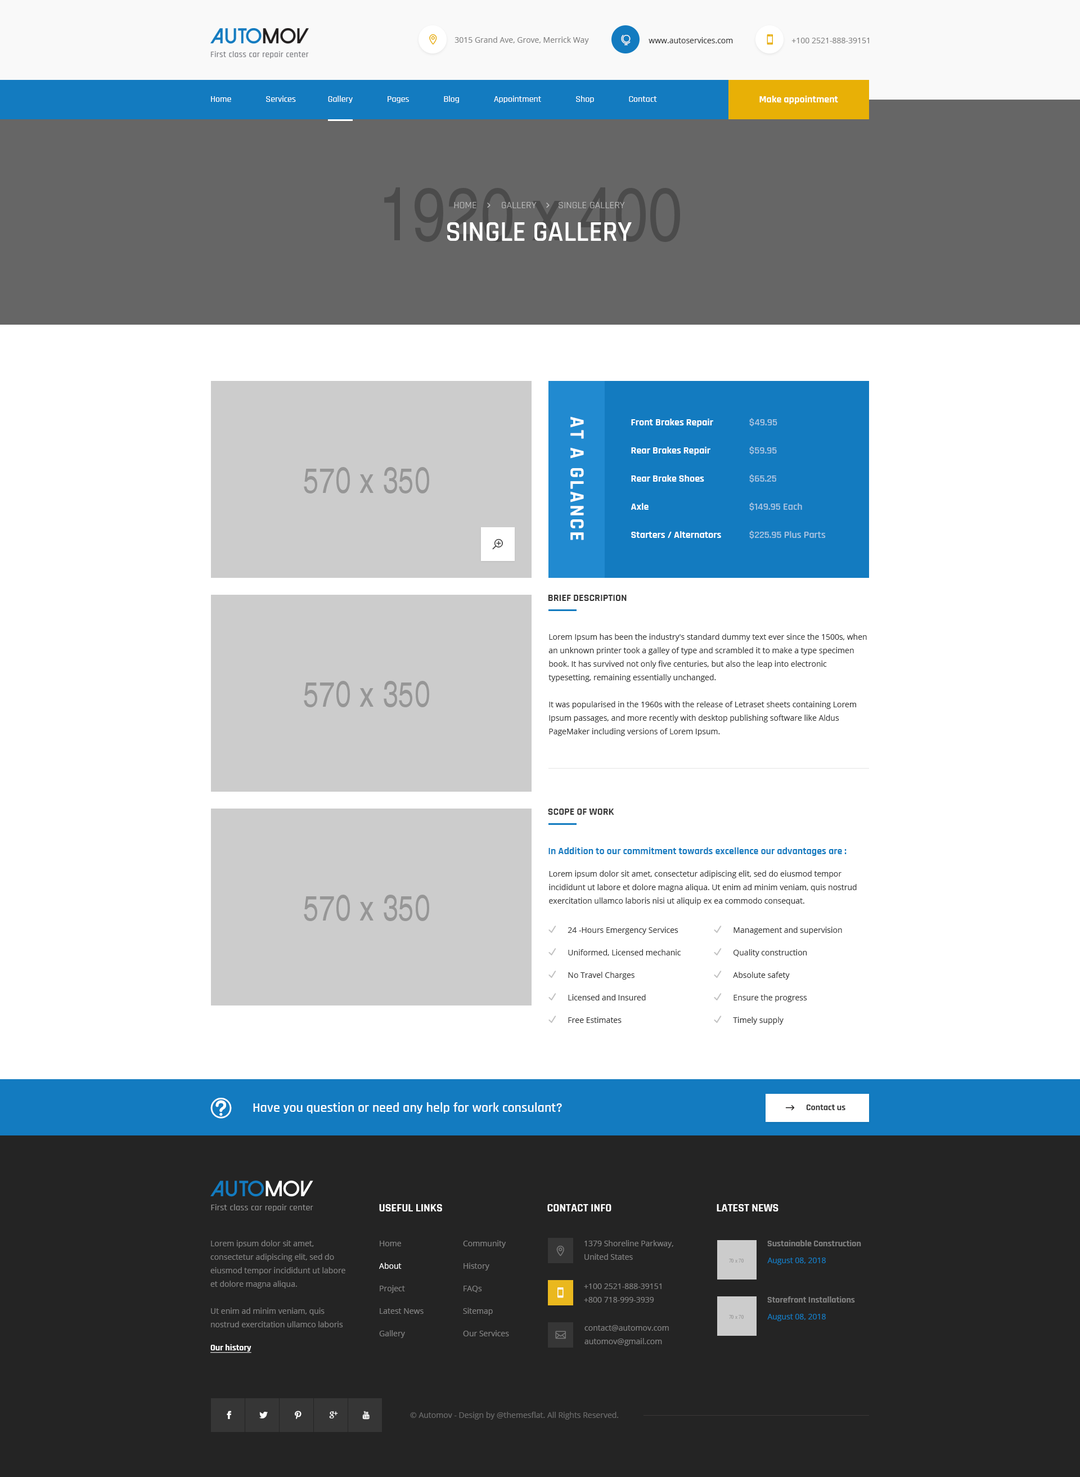
<style>
.page{position:relative;width:1080px;height:1477px;background:#ffffff}
.page>*{position:absolute;margin:0}
.t1{font:7.9px "OpenSans";color:#838383}
.t2{font:7.9px "OpenSans";color:#363636}
.t3{font:9px "Rajdhani-Medium";color:#ffffff}
.t4{font:10.1px "Rajdhani-Bold";color:#ffffff}
.t5{font:10.1px "Rajdhani-Regular";color:#bcbcbc}
.t6{font:28.1px "Rajdhani-SemiBold";color:#ffffff;text-transform:uppercase}
.t7{font:20.2px "Rajdhani-Bold";letter-spacing:0.1em;color:#ffffff}
.t8{font:10.1px/28.1px "Rajdhani-Bold";color:#ffffff}
.t9{font:10.1px/28.1px "Rajdhani-SemiBold";color:#a7c4e1}
.t10{font:10.1px "Rajdhani-Bold";color:#363636}
.t11{font:7.9px/13.5px "OpenSans";color:#363636}
.t12{font:10.1px "Rajdhani-Bold";color:#137bc0}
.t13{font:7.9px/22.5px "OpenSans";color:#363636}
.t14{font:13.5px "Rajdhani-SemiBold";color:#ffffff}
.t15{font:9px "Rajdhani-Bold";color:#363636}
.t16{font:11.2px "Rajdhani-Bold";color:#ffffff;text-transform:uppercase}
.t17{font:11.2px "Rajdhani-Bold";color:#ffffff}
.t18{font:7.9px/13.5px "OpenSans";color:#808080}
.t19{font:7.9px/22.5px "OpenSans";color:#808080}
.t20{font:7.9px/22.5px "OpenSans";color:#ffffff}
.t21{font:9px "Rajdhani-Bold";color:#808080}
.t22{font:7.9px "OpenSans";color:#137bc0}
.t23{font:9px "Rajdhani-Bold";color:#ffffff;text-decoration:underline}
.t24{font:7.9px "OpenSans";color:#6a6a6a}
</style>
<div class="page">
<p class="t1" style="left:454px;top:37px;width:135px;height:7px">3015 Grand Ave, Grove, Merrick Way</p>
<p class="t2" style="left:649px;top:37px;width:84px;height:6px">www.autoservices.com</p>
<p class="t1" style="left:791px;top:38px;width:78px;height:5px">+100 2521-888-39151</p>
<p class="t3" style="left:211px;top:96px;width:446px;height:7px">Home               Services              Gallery               Pages               Blog               Appointment               Shop               Contact</p>
<p class="t4" style="left:759px;top:96px;width:79px;height:8px">Make appointment</p>
<p class="t5" style="left:454px;top:202px;width:171px;height:6px">HOME         GALLERY        SINGLE GALLERY</p>
<p class="t6" style="left:447px;top:222px;width:185px;height:19px">SINGLE gallery</p>
<p class="t7" style="left:570px;top:416px;width:14px;height:124px;rotate:90deg">AT A GLANCE</p>
<p class="t8" style="left:631px;top:418px;width:90px;height:120px">Front Brakes Repair<br>Rear Brakes Repair<br>Rear Brake Shoes<br>Axle<br>Starters / Alternators</p>
<p class="t9" style="left:749px;top:418px;width:77px;height:121px">$49.95<br>$59.95<br>$65.25<br>$149.95 Each<br>$225.95 Plus Parts</p>
<p class="t10" style="left:548px;top:595px;width:79px;height:6px">BRIEF DESCRIPTION</p>
<p class="t11" style="left:548px;top:633px;width:319px;height:103px">Lorem Ipsum has been the industry's standard dummy text ever since the 1500s, when an unknown printer took a galley of type and scrambled it to make a type specimen book. It has survived not only five centuries, but also the leap into electronic typesetting, remaining essentially unchanged. <br><br>It was popularised in the 1960s with the release of Letraset sheets containing Lorem Ipsum passages, and more recently with desktop publishing software like Aldus PageMaker including versions of Lorem Ipsum.</p>
<p class="t10" style="left:548px;top:808px;width:66px;height:6px">SCOPE OF WORK</p>
<p class="t12" style="left:548px;top:847px;width:299px;height:9px">In Addition to our commitment towards excellence our advantages are :</p>
<p class="t11" style="left:549px;top:870px;width:308px;height:35px">Lorem ipsum dolor sit amet, consectetur adipiscing elit, sed do eiusmod tempor incididunt ut labore et dolore magna aliqua. Ut enim ad minim veniam, quis nostrud exercitation ullamco laboris nisi ut aliquip ex ea commodo consequat.</p>
<p class="t13" style="left:568px;top:926px;width:113px;height:97px">24 -Hours Emergency Services<br>Uniformed, Licensed mechanic<br>No Travel Charges<br>Licensed and Insured<br>Free Estimates</p>
<p class="t13" style="left:733px;top:926px;width:109px;height:98px">Management and supervision<br>Quality construction<br>Absolute safety<br>Ensure the progress<br>Timely supply</p>
<p class="t14" style="left:253px;top:1102px;width:309px;height:11px">Have you question or need any help for work consulant?</p>
<p class="t15" style="left:806px;top:1104px;width:39px;height:6px">Contact us</p>
<p class="t16" style="left:379px;top:1204px;width:63px;height:7px">Useful Links</p>
<p class="t17" style="left:547px;top:1204px;width:64px;height:7px">CONTACT INFO</p>
<p class="t16" style="left:717px;top:1204px;width:61px;height:7px">Latest news</p>
<p class="t18" style="left:210px;top:1240px;width:135px;height:87px">Lorem ipsum dolor sit amet, consectetur adipiscing elit, sed do eiusmod tempor incididunt ut labore et dolore magna aliqua. <br><br>Ut enim ad minim veniam, quis nostrud exercitation ullamco laboris nisi</p>
<p class="t19" style="left:379px;top:1240px;width:45px;height:98px">Home<br><span class="t20">About<br></span>Project<br>Latest News<br>Gallery</p>
<p class="t19" style="left:463px;top:1240px;width:46px;height:96px">Community<br>History<br>FAQs<br>Sitemap<br>Our Services</p>
<p class="t18" style="left:584px;top:1240px;width:89px;height:19px">1379 Shoreline Parkway, <br>United States</p>
<p class="t21" style="left:767px;top:1240px;width:94px;height:6px">Sustainable Construction</p>
<p class="t22" style="left:767px;top:1257px;width:59px;height:7px">August 08, 2018</p>
<p class="t18" style="left:584px;top:1283px;width:78px;height:19px">+100 2521-888-39151<br>+800 718-999-3939</p>
<p class="t21" style="left:767px;top:1296px;width:88px;height:6px">Storefront Installations</p>
<p class="t22" style="left:767px;top:1313px;width:59px;height:8px">August 08, 2018</p>
<p class="t18" style="left:584px;top:1325px;width:85px;height:21px">contact@automov.com<br>automov@gmail.com</p>
<p class="t23" style="left:210px;top:1344px;width:41px;height:9px">Our history</p>
<p class="t24" style="left:410px;top:1411px;width:208px;height:8px">© Automov - Design by @themesflat. All Rights Reserved.</p>
</div>
